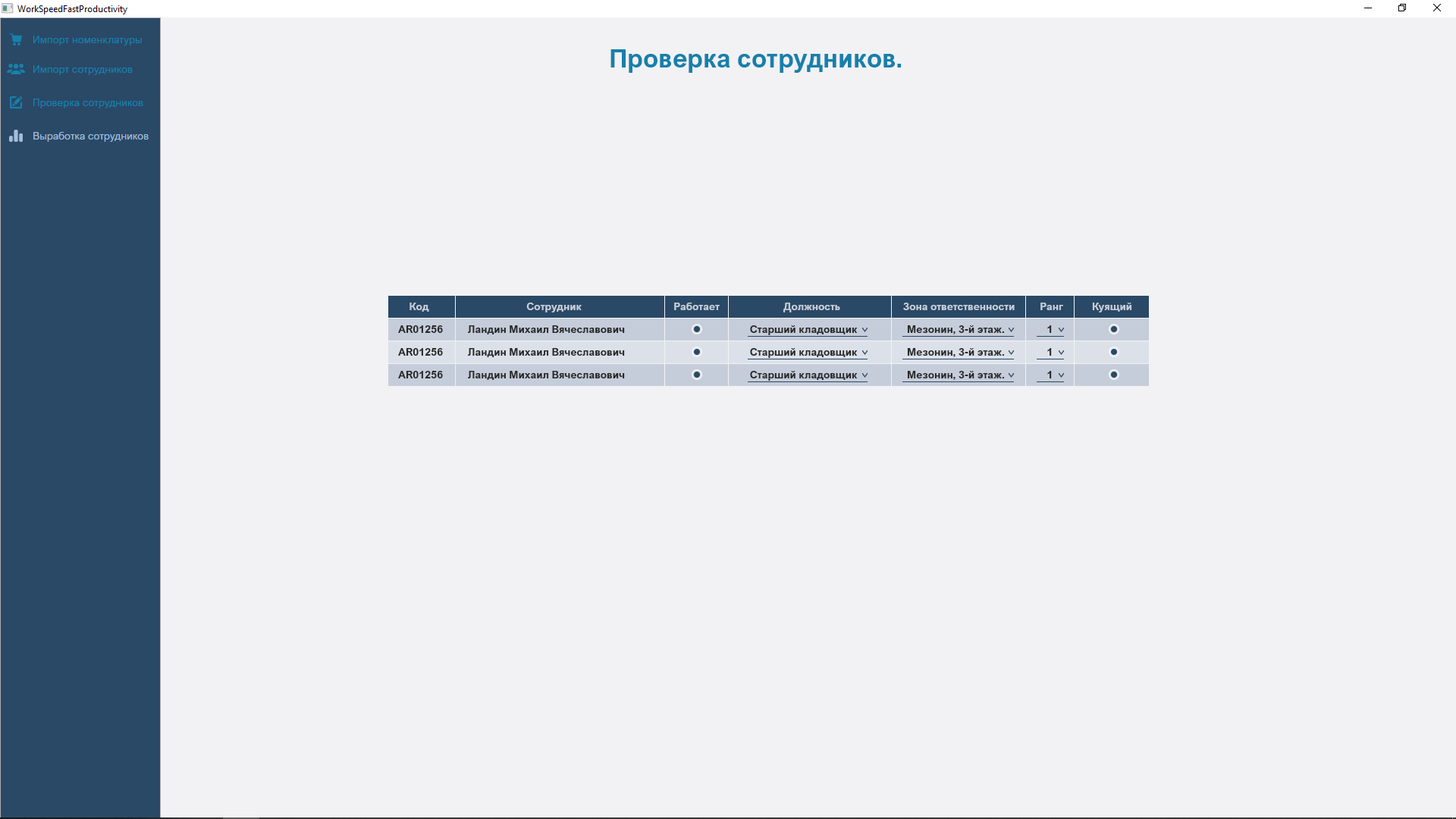
<style>
.page{position:relative;width:1456px;height:819px;background:#f2f2f4}
.page>*{position:absolute;margin:0}
.t1{font:25.8px "ArialNova-Bold";color:#1780ac}
.t2{font:10.6px "ArialNova-Bold";color:#c6cdda}
.t3{font:10.6px "ArialNova-Bold";color:#282828}
</style>
<div class="page">
<p class="t1" style="left:610px;top:49px;width:292px;height:24px">Проверка сотрудников.</p>
<p class="t2" style="left:409px;top:303px;width:20px;height:9px">Код</p>
<p class="t2" style="left:526px;top:303px;width:56px;height:9px">Сотрудник</p>
<p class="t2" style="left:674px;top:303px;width:46px;height:7px">Работает</p>
<p class="t2" style="left:783px;top:303px;width:57px;height:9px">Должность</p>
<p class="t2" style="left:903px;top:303px;width:112px;height:7px">Зона ответственности</p>
<p class="t2" style="left:1040px;top:303px;width:23px;height:7px">Ранг</p>
<p class="t2" style="left:1092px;top:303px;width:40px;height:9px">Куящий</p>
<p class="t3" style="left:398px;top:325px;width:45px;height:8px">AR01256</p>
<p class="t3" style="left:467px;top:325px;width:158px;height:9px">Ландин Михаил Вячеславович</p>
<p class="t3" style="left:750px;top:325px;width:108px;height:10px">Старший кладовщик</p>
<p class="t3" style="left:907px;top:325px;width:97px;height:9px">Мезонин, 3-й этаж.</p>
<p class="t3" style="left:1047px;top:325px;width:5px;height:8px">1</p>
<p class="t3" style="left:398px;top:348px;width:45px;height:8px">AR01256</p>
<p class="t3" style="left:467px;top:348px;width:158px;height:9px">Ландин Михаил Вячеславович</p>
<p class="t3" style="left:750px;top:348px;width:108px;height:10px">Старший кладовщик</p>
<p class="t3" style="left:907px;top:348px;width:97px;height:9px">Мезонин, 3-й этаж.</p>
<p class="t3" style="left:1047px;top:348px;width:5px;height:8px">1</p>
<p class="t3" style="left:398px;top:371px;width:45px;height:7px">AR01256</p>
<p class="t3" style="left:467px;top:371px;width:158px;height:9px">Ландин Михаил Вячеславович</p>
<p class="t3" style="left:750px;top:371px;width:108px;height:10px">Старший кладовщик</p>
<p class="t3" style="left:907px;top:371px;width:97px;height:9px">Мезонин, 3-й этаж.</p>
<p class="t3" style="left:1047px;top:371px;width:5px;height:7px">1</p>
</div>
